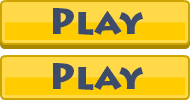
<style>
.page{position:relative;width:190px;height:100px;background:#ffd948}
.page>*{position:absolute;margin:0}
.t1{font:36px "LithosPro-Black";color:#3d4c6b}
</style>
<div class="page">
<p class="t1" style="left:53px;top:8px;width:90px;height:27px">Play</p>
<p class="t1" style="left:53px;top:63px;width:90px;height:27px">Play</p>
</div>
